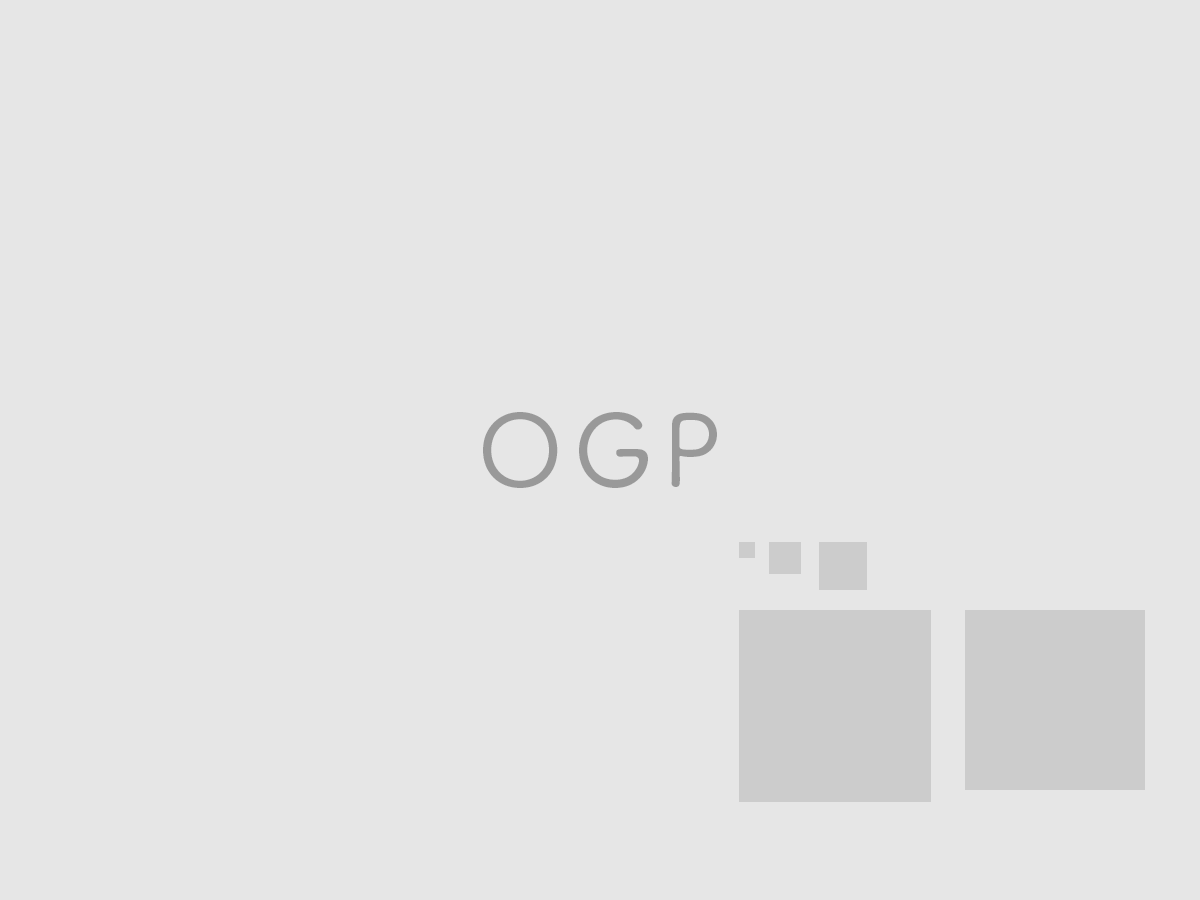
<style>
.page{position:relative;width:1200px;height:900px;background:#e6e6e6}
.page>*{position:absolute;margin:0}
.t1{font:100px "TsukuARdGothicStd-M";letter-spacing:0.12em;color:#999999}
</style>
<div class="page">
<p class="t1" style="left:483px;top:412px;width:234px;height:76px">OGP</p>
</div>
